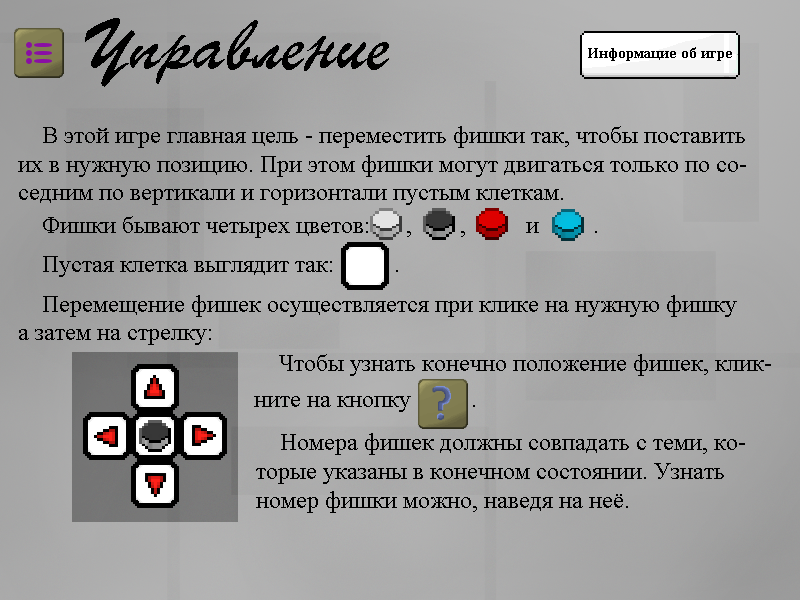
<style>
.page{position:relative;width:800px;height:600px}
.page>*{position:absolute;margin:0}
.t1{font:69.3px "ParsekCTT";color:#000000}
.t2{font:24px "TimesNewRomanPSMT";color:#000000}
</style>
<div class="page">
<p class="t1" style="left:85px;top:18px;width:304px;height:69px">Управление</p>
<p class="t2" style="left:18px;top:126px;width:728px;height:79px">В этой игре главная цель - переместить фишки так, чтобы поставить их в нужную позицию. При этом фишки могут двигаться только по соседним по вертикали и горизонтали пустым клеткам.</p>
<p class="t2" style="left:43px;top:216px;width:554px;height:22px">Фишки бывают четырех цветов:      ,        ,          и         .</p>
<p class="t2" style="left:43px;top:256px;width:355px;height:21px">Пустая клетка выглядит так:          .</p>
<p class="t2" style="left:19px;top:295px;width:718px;height:50px">Перемещение фишек осуществляется при клике на нужную фишку а затем на стрелку:</p>
<p class="t2" style="left:279px;top:354px;width:492px;height:22px">Чтобы узнать конечно положение фишек, клик-</p>
<p class="t2" style="left:254px;top:396px;width:221px;height:16px">ните на кнопку          .</p>
<p class="t2" style="left:256px;top:433px;width:489px;height:80px">Номера фишек должны совпадать с теми, которые указаны в конечном состоянии. Узнать номер фишки можно, наведя на неё.</p>
</div>
